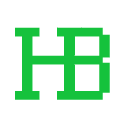
<style>
.page{position:relative;width:128px;height:128px;background:#ffffff}
.page>*{position:absolute;margin:0}
.t1{font:112.5px "Courier";letter-spacing:-0.25em;color:#15c23c;font-weight:bold}
</style>
<div class="page">
<p class="t1" style="left:15px;top:27px;width:95px;height:73px">HB</p>
</div>
